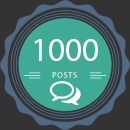
<style>
.page{position:relative;width:130px;height:130px;background:#3faa96}
.page>*{position:absolute;margin:0}
.t1{font:33.5px "MyriadPro-Regular";color:#ffffff}
.t2{font:8px "MyriadPro-Regular";letter-spacing:0.1em}
</style>
<div class="page">
<p class="t1" style="left:34px;top:39px;width:64px;height:22px">1000</p>
<p class="t2" style="left:52px;top:72px;width:25px;height:6px">POSTS</p>
</div>
